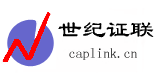
<style>
.page{position:relative;width:160px;height:80px;background:#ffffff}
.page>*{position:absolute;margin:0}
.t1{font:24px "Á¥Êé-Regular";color:#000000}
.t2{font:13.7px "Á¥Êé-Regular";color:#000000}
</style>
<div class="page">
<p class="t1" style="left:58px;top:22px;width:96px;height:16px">世纪证联</p>
<p class="t2" style="left:69px;top:48px;width:68px;height:12px">caplink.cn</p>
</div>
